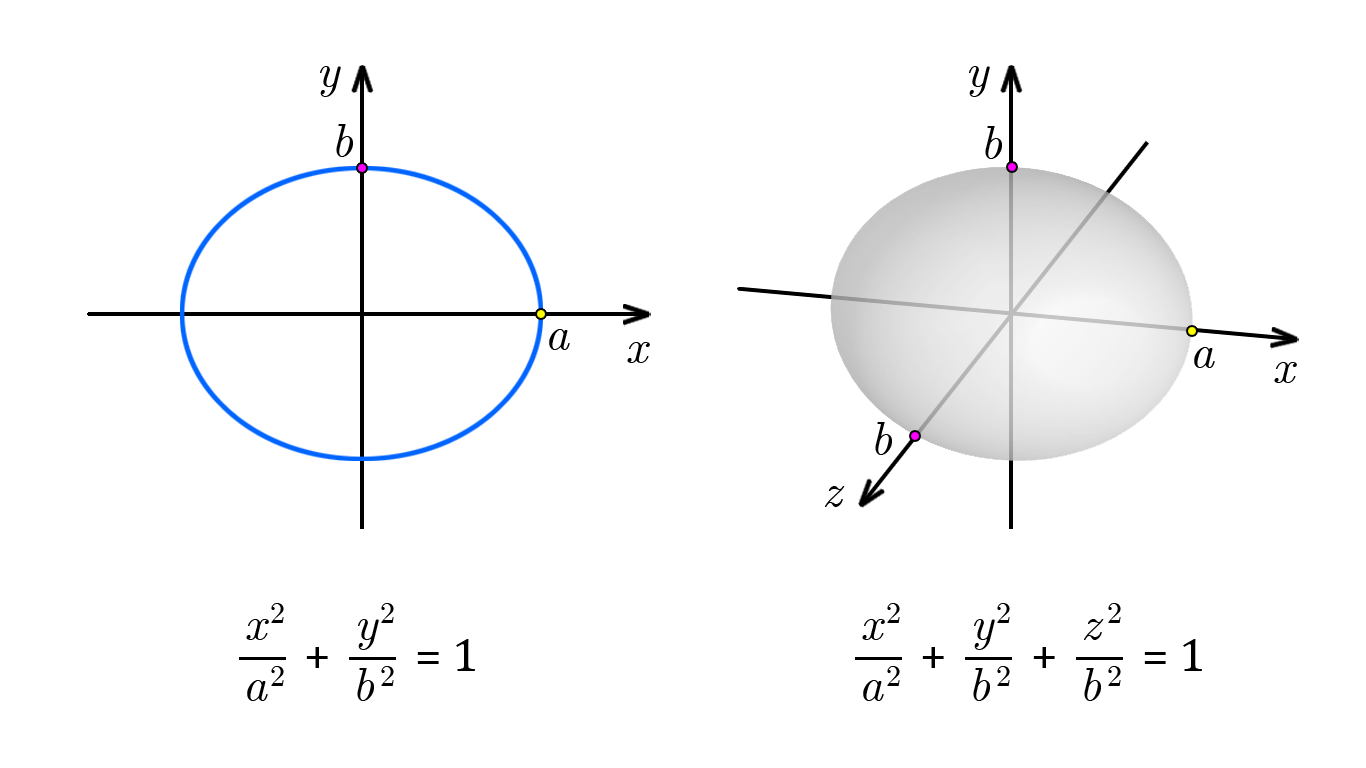
<style>
.page{position:relative;width:1366px;height:768px;background:#ffffff}
.page>*{position:absolute;margin:0}
.t1{font:48px "CMUSerif-Italic";color:#000000}
.t2{font:30px "CMUSerif-Roman";color:#000000}
.t3{font:48px "Cambria";color:#000000}
</style>
<div class="page">
<p class="t1" style="left:320px;top:66px;width:21px;height:31px">y</p>
<p class="t1" style="left:969px;top:66px;width:21px;height:31px">y</p>
<p class="t1" style="left:336px;top:124px;width:17px;height:33px">b</p>
<p class="t1" style="left:985px;top:126px;width:17px;height:33px">b</p>
<p class="t1" style="left:549px;top:329px;width:21px;height:21px">a</p>
<p class="t1" style="left:627px;top:342px;width:23px;height:21px">x</p>
<p class="t1" style="left:1194px;top:347px;width:21px;height:21px">a</p>
<p class="t1" style="left:1274px;top:362px;width:23px;height:21px">x</p>
<p class="t1" style="left:875px;top:422px;width:17px;height:33px">b</p>
<p class="t1" style="left:825px;top:486px;width:20px;height:21px">z</p>
<p class="t2" style="left:271px;top:603px;width:13px;height:20px">2</p>
<p class="t2" style="left:381px;top:603px;width:13px;height:20px">2</p>
<p class="t2" style="left:887px;top:603px;width:13px;height:20px">2</p>
<p class="t2" style="left:997px;top:603px;width:13px;height:20px">2</p>
<p class="t2" style="left:1108px;top:603px;width:13px;height:20px">2</p>
<p class="t1" style="left:246px;top:619px;width:23px;height:21px">x</p>
<p class="t1" style="left:358px;top:619px;width:21px;height:31px">y</p>
<p class="t1" style="left:862px;top:619px;width:23px;height:21px">x</p>
<p class="t1" style="left:974px;top:619px;width:21px;height:31px">y</p>
<p class="t1" style="left:1084px;top:619px;width:20px;height:21px">z</p>
<p class="t3" style="left:306px;top:639px;width:169px;height:32px">+        = 1</p>
<p class="t3" style="left:922px;top:639px;width:280px;height:32px">+        +        = 1</p>
<p class="t2" style="left:271px;top:666px;width:13px;height:20px">2</p>
<p class="t1" style="left:357px;top:668px;width:17px;height:33px">b</p>
<p class="t2" style="left:381px;top:666px;width:13px;height:20px">2</p>
<p class="t2" style="left:887px;top:666px;width:13px;height:20px">2</p>
<p class="t1" style="left:973px;top:668px;width:17px;height:33px">b</p>
<p class="t2" style="left:997px;top:666px;width:13px;height:20px">2</p>
<p class="t1" style="left:1084px;top:668px;width:17px;height:33px">b</p>
<p class="t2" style="left:1108px;top:666px;width:13px;height:20px">2</p>
<p class="t1" style="left:247px;top:680px;width:21px;height:21px">a</p>
<p class="t1" style="left:863px;top:680px;width:21px;height:21px">a</p>
</div>
